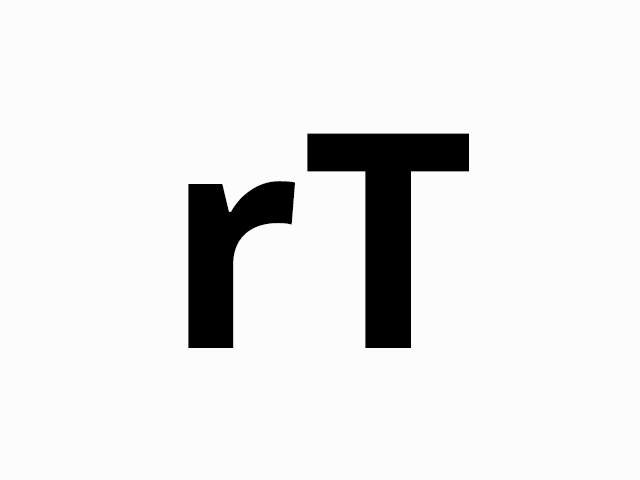
<style>
.page{position:relative;width:640px;height:480px;background:#fcfcfc}
.page>*{position:absolute;margin:0}
.t1{font:300px "OpenSans-Bold";color:#000000}
</style>
<div class="page">
<p class="t1" style="left:188px;top:133px;width:281px;height:215px">rT</p>
</div>
